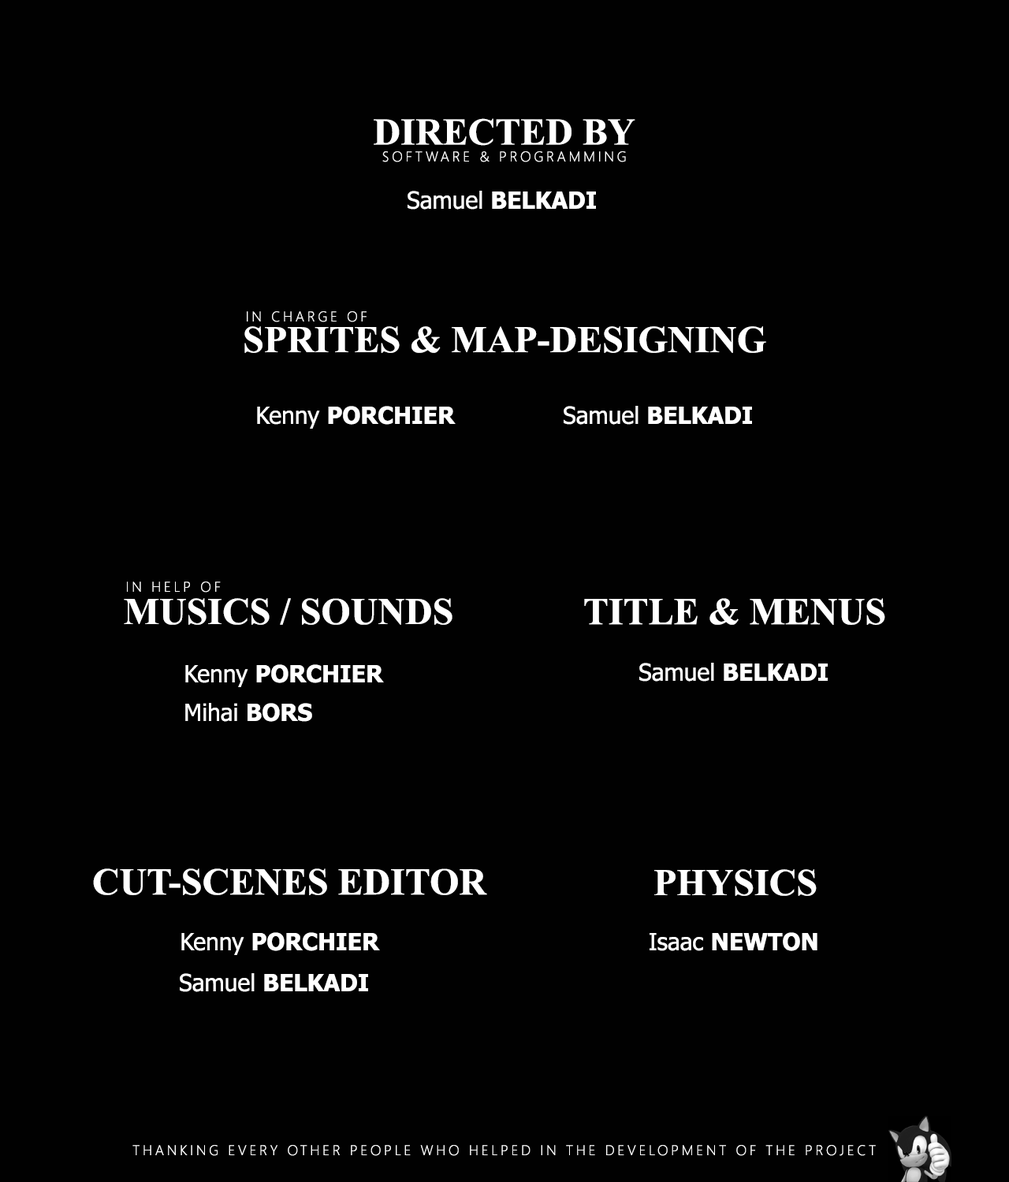
<style>
.page{position:relative;width:1009px;height:1182px;background:#010101}
.page>*{position:absolute;margin:0}
.t1{font:37.8px "TimesNewRomanPS-BoldMT";color:#ffffff}
.t2{font:14.2px "SegoeUI-Light";letter-spacing:0.2em;color:#ffffff}
.t3{font:23.6px "Tahoma-Bold";color:#ffffff}
.t4{font:23.6px "Tahoma";color:#ffffff}
</style>
<div class="page">
<p class="t1" style="left:374px;top:118px;width:261px;height:28px">DIRECTED BY</p>
<p class="t2" style="left:382px;top:151px;width:244px;height:11px">SOFTWARE &amp; PROGRAMMING</p>
<p class="t3" style="left:407px;top:191px;width:189px;height:19px"><span class="t4">Samuel </span>BELKADI</p>
<p class="t2" style="left:247px;top:311px;width:119px;height:11px">IN CHARGE OF</p>
<p class="t1" style="left:244px;top:326px;width:522px;height:27px">SPRITES &amp; MAP-DESIGNING</p>
<p class="t3" style="left:257px;top:406px;width:199px;height:23px"><span class="t4">Kenny </span>PORCHIER</p>
<p class="t3" style="left:563px;top:406px;width:189px;height:19px"><span class="t4">Samuel </span>BELKADI</p>
<p class="t2" style="left:127px;top:582px;width:94px;height:11px">IN HELP OF</p>
<p class="t1" style="left:124px;top:598px;width:328px;height:27px">MUSICS / SOUNDS</p>
<p class="t1" style="left:584px;top:598px;width:301px;height:27px">TITLE &amp; MENUS</p>
<p class="t3" style="left:185px;top:664px;width:199px;height:23px"><span class="t4">Kenny </span>PORCHIER</p>
<p class="t3" style="left:639px;top:663px;width:188px;height:19px"><span class="t4">Samuel </span>BELKADI</p>
<p class="t4" style="left:185px;top:703px;width:127px;height:19px">Mihai <span class="t3">BORS</span></p>
<p class="t1" style="left:93px;top:868px;width:394px;height:27px">CUT-SCENES EDITOR</p>
<p class="t1" style="left:654px;top:869px;width:162px;height:27px">PHYSICS</p>
<p class="t3" style="left:181px;top:932px;width:199px;height:23px"><span class="t4">Kenny </span>PORCHIER</p>
<p class="t3" style="left:649px;top:932px;width:168px;height:19px"><span class="t4">Isaac </span>NEWTON</p>
<p class="t3" style="left:180px;top:973px;width:188px;height:19px"><span class="t4">Samuel </span>BELKADI</p>
<p class="t2" style="left:132px;top:1145px;width:744px;height:11px">THANKING EVERY OTHER PEOPLE WHO HELPED IN THE DEVELOPMENT OF THE PROJECT</p>
</div>
